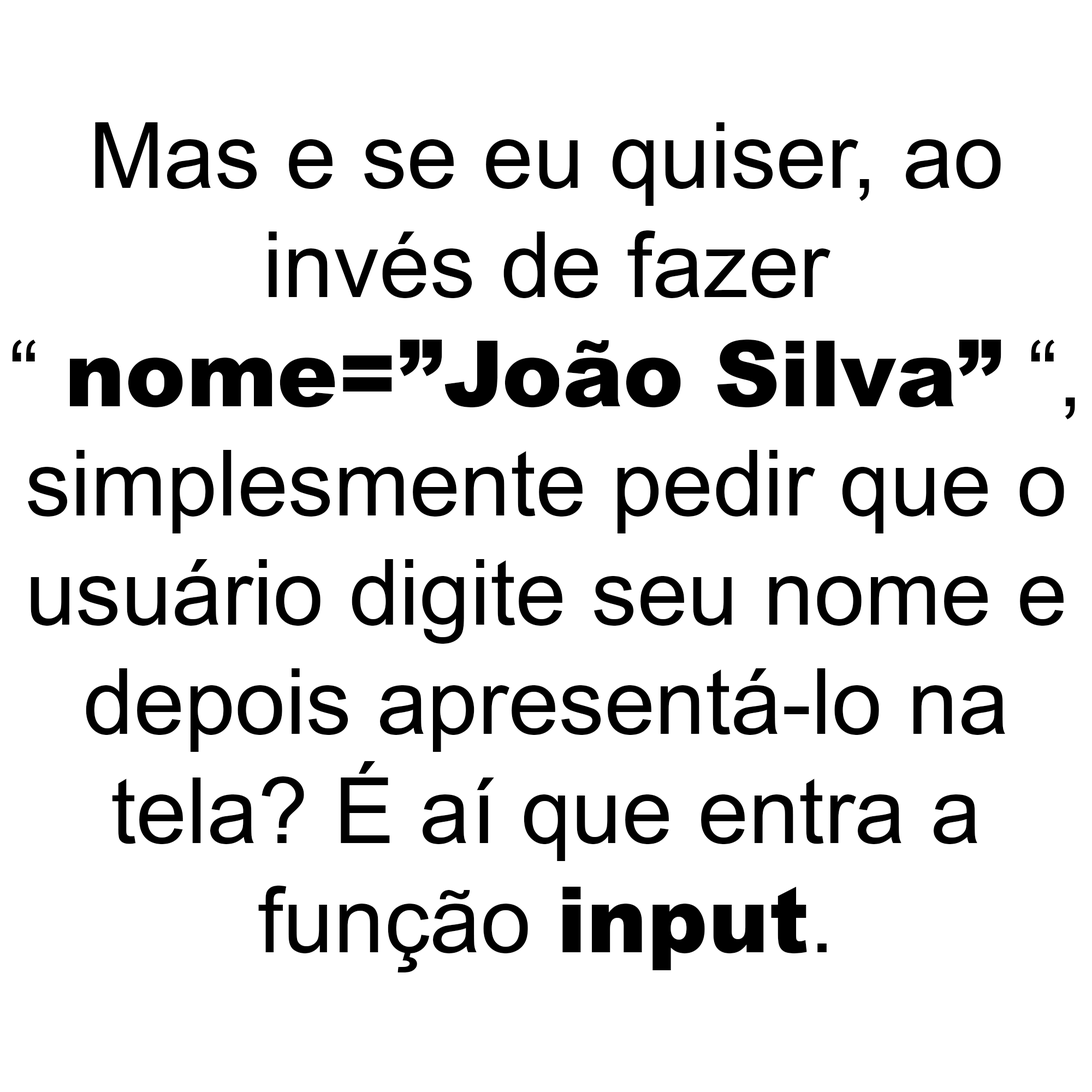
<style>
.page{position:relative;width:1092px;height:1092px;background:#ffffff}
.page>*{position:absolute;margin:0}
.t1{font:91px "ArialMT";color:#000000}
.t2{font:91px "Arial-Black";color:#000000}
</style>
<div class="page">
<p class="t1" style="left:12px;top:122px;width:1063px;height:850px;text-align:center">Mas e se eu quiser, ao<br>invés de fazer<br>“ <span class="t2">nome=”João Silva”</span> “,<br>simplesmente pedir que o<br>usuário digite seu nome e<br>depois apresentá-lo na<br>tela? É aí que entra a<br>função <span class="t2">input</span>.</p>
</div>
